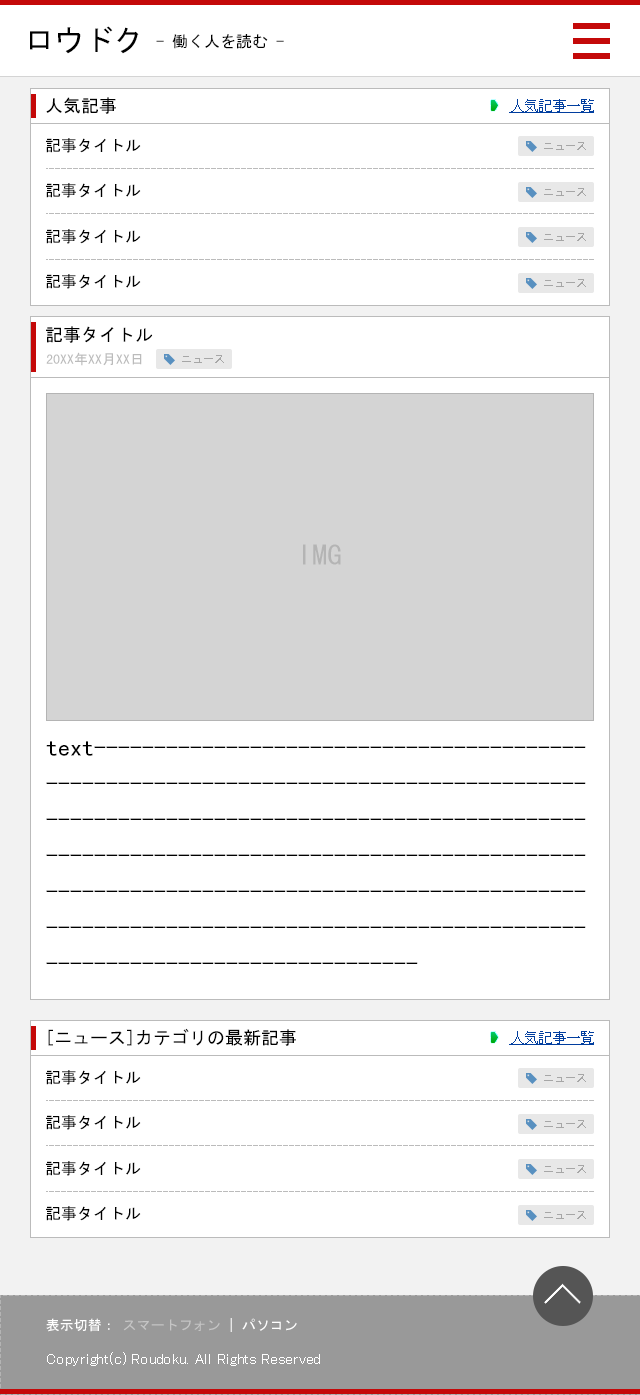
<style>
.page{position:relative;width:640px;height:1395px;background:#ffffff}
.page>*{position:absolute;margin:0}
.t1{font:30px "MS-Gothic";color:#000000}
.t2{font:16px "MS-Gothic";color:#000000}
.t3{font:18px "MS-Gothic";color:#000000}
.t4{font:14px "MS-Gothic";color:#013e9f;text-decoration:underline}
.t5{font:14px "MS-Gothic";color:#bbbbbb}
.t6{font:30px "MS-Gothic";color:#b4b4b4}
.t7{font:24px/36px "MS-Gothic";color:#000000}
.t8{font:14px "MS-Gothic";color:#c5c5c5}
.t9{font:14px "MS-Gothic";color:#ffffff}
</style>
<div class="page">
<p class="t1" style="left:30px;top:26px;width:109px;height:28px">ロウドク</p>
<p class="t2" style="left:156px;top:34px;width:128px;height:15px">- 働く人を読む -</p>
<p class="t3" style="left:46px;top:97px;width:70px;height:17px">人気記事</p>
<p class="t4" style="left:509px;top:99px;width:85px;height:14px">人気記事一覧</p>
<p class="t2" style="left:46px;top:138px;width:95px;height:15px">記事タイトル</p>
<p class="t2" style="left:46px;top:183px;width:95px;height:15px">記事タイトル</p>
<p class="t2" style="left:46px;top:229px;width:95px;height:15px">記事タイトル</p>
<p class="t2" style="left:46px;top:274px;width:95px;height:15px">記事タイトル</p>
<p class="t3" style="left:46px;top:326px;width:107px;height:17px">記事タイトル</p>
<p class="t5" style="left:46px;top:352px;width:96px;height:14px">20XX年XX月XX日</p>
<p class="t6" style="left:303px;top:544px;width:38px;height:21px">IMG</p>
<p class="t7" style="left:46px;top:741px;width:540px;height:223px">text---------------------------------------------------------------------------------------------------------------------------------------------------------------------------------------------------------------------------------------------------------------------------------------------------------</p>
<p class="t3" style="left:48px;top:1028px;width:248px;height:18px">[ニュース]カテゴリの最新記事</p>
<p class="t4" style="left:509px;top:1031px;width:85px;height:14px">人気記事一覧</p>
<p class="t2" style="left:46px;top:1070px;width:95px;height:15px">記事タイトル</p>
<p class="t2" style="left:46px;top:1115px;width:95px;height:15px">記事タイトル</p>
<p class="t2" style="left:46px;top:1161px;width:95px;height:15px">記事タイトル</p>
<p class="t2" style="left:46px;top:1206px;width:95px;height:15px">記事タイトル</p>
<p class="t8" style="left:46px;top:1318px;width:251px;height:14px"><span class="t9">表示切替： </span>スマートフォン<span class="t9"> | パソコン</span></p>
</div>
